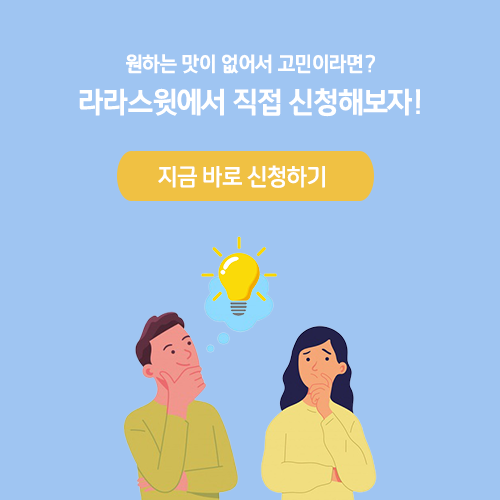
<style>
.page{position:relative;width:500px;height:500px;background:#9fc5f2}
.page>*{position:absolute;margin:0}
.t1{font:19.4px "payboocExtraBold";color:#ffffff;scale:0.95 1}
.t2{font:27.8px "payboocExtraBold";color:#ffffff;scale:0.95 1}
.t3{font:22.2px "payboocBold";color:#ffffff;scale:0.95 1}
</style>
<div class="page">
<p class="t1" style="left:126px;top:54px;width:249px;height:20px">원하는 맛이 없어서 고민이라면?</p>
<p class="t2" style="left:79px;top:88px;width:341px;height:29px">라라스윗에서 직접 신청해보자!</p>
<p class="t3" style="left:158px;top:165px;width:167px;height:23px">지금 바로 신청하기</p>
</div>
